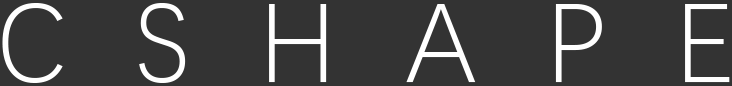
<style>
.page{position:relative;width:732px;height:86px;background:#333333}
.page>*{position:absolute;margin:0}
.t1{font:114px "DengXian-Light";letter-spacing:0.6em;color:#ffffff}
</style>
<div class="page">
<p class="t1" style="left:2px;top:3px;width:728px;height:80px">CSHAPE</p>
</div>
